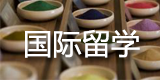
<style>
.page{position:relative;width:160px;height:80px}
.page>*{position:absolute;margin:0}
.t1{font:28.8px "MicrosoftYaHei";color:#ffffff}
</style>
<div class="page">
<p class="t1" style="left:25px;top:29px;width:115px;height:29px">国际留学</p>
</div>
